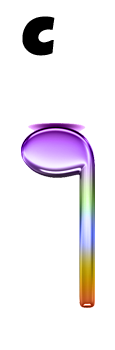
<style>
.page{position:relative;width:115px;height:350px;background:#ffffff}
.page>*{position:absolute;margin:0}
.t1{font:54px "LuckiestGuy-Regular";letter-spacing:0.005em;color:#000000;font-weight:bold;scale:1.11 1}
</style>
<div class="page">
<p class="t1" style="left:22px;top:16px;width:33px;height:40px">C</p>
</div>
